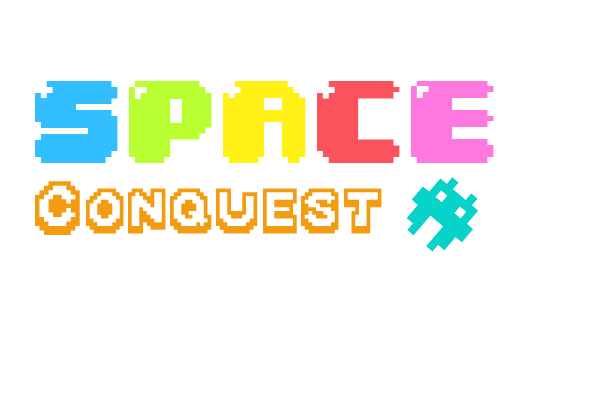
<style>
.page{position:relative;width:600px;height:400px;background:#ffffff}
.page>*{position:absolute;margin:0}
.t1{font:100px "04b30";color:#32beff}
.t2{font:100px "04b30";color:#b9ff32}
.t3{font:100px "04b30";color:#fff116}
.t4{font:100px "04b30";color:#fa535e}
.t5{font:100px "04b30";color:#ff78df}
.t6{font:60px "Mario-Kart-DS";color:#f39c12}
.t7{font:71.7px "Mario-Kart-DS";color:#f39c12}
</style>
<div class="page">
<p class="t1" style="left:35px;top:81px;width:459px;height:82px">S<span class="t2">P</span><span class="t3">A</span><span class="t4">C</span><span class="t5">E</span></p>
<p class="t6" style="left:35px;top:181px;width:347px;height:54px"><span class="t7">C</span>ONQUEST</p>
</div>
